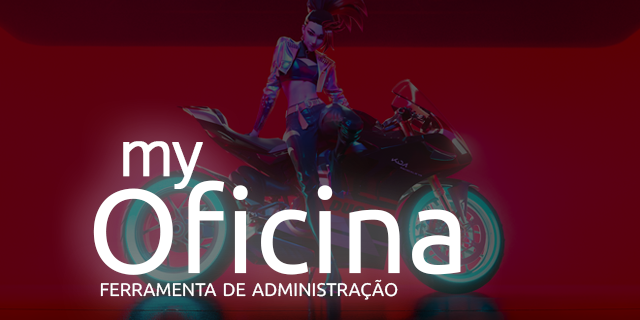
<style>
.page{position:relative;width:640px;height:320px}
.page>*{position:absolute;margin:0}
.t1{font:119.3px/97.5px "Ubuntu-Regular";letter-spacing:-0.005em;color:#ffffff}
.t2{font:87.3px/97.5px "Microsoft-Yi-Baiti";letter-spacing:-0.11em;color:#ffffff;font-weight:bold}
.t3{font:87.3px/97.5px "Microsoft-Yi-Baiti";letter-spacing:-0.05em;color:#ffffff;font-weight:bold}
.t4{font:26.2px "Ubuntu-Regular";color:#ffffff;font-variant:small-caps}
</style>
<div class="page">
<p class="t1" style="left:93px;top:141px;width:368px;height:134px"><span class="t2"> </span><span class="t3">my<br></span>Oficina</p>
<p class="t4" style="left:100px;top:279px;width:298px;height:21px">ferramenta de administração</p>
</div>
